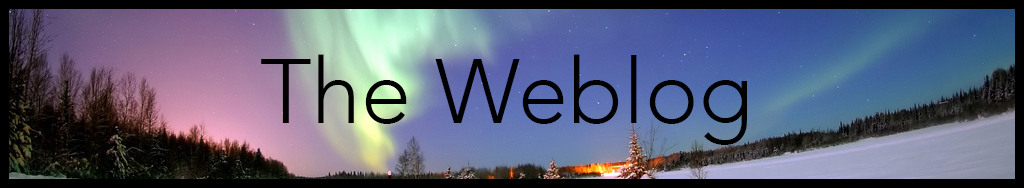
<style>
.page{position:relative;width:1024px;height:188px}
.page>*{position:absolute;margin:0}
.t1{font:90px "Avenir-Light";color:#000000}
</style>
<div class="page">
<p class="t1" style="left:261px;top:54px;width:486px;height:91px">The Weblog</p>
</div>
